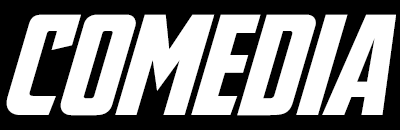
<style>
.page{position:relative;width:400px;height:130px;background:#ffffff}
.page>*{position:absolute;margin:0}
.t1{font:137.7px "AvengeanceHeroicAvengerNormal";color:#ffffff}
</style>
<div class="page">
<p class="t1" style="left:6px;top:14px;width:390px;height:102px">comedia</p>
</div>
